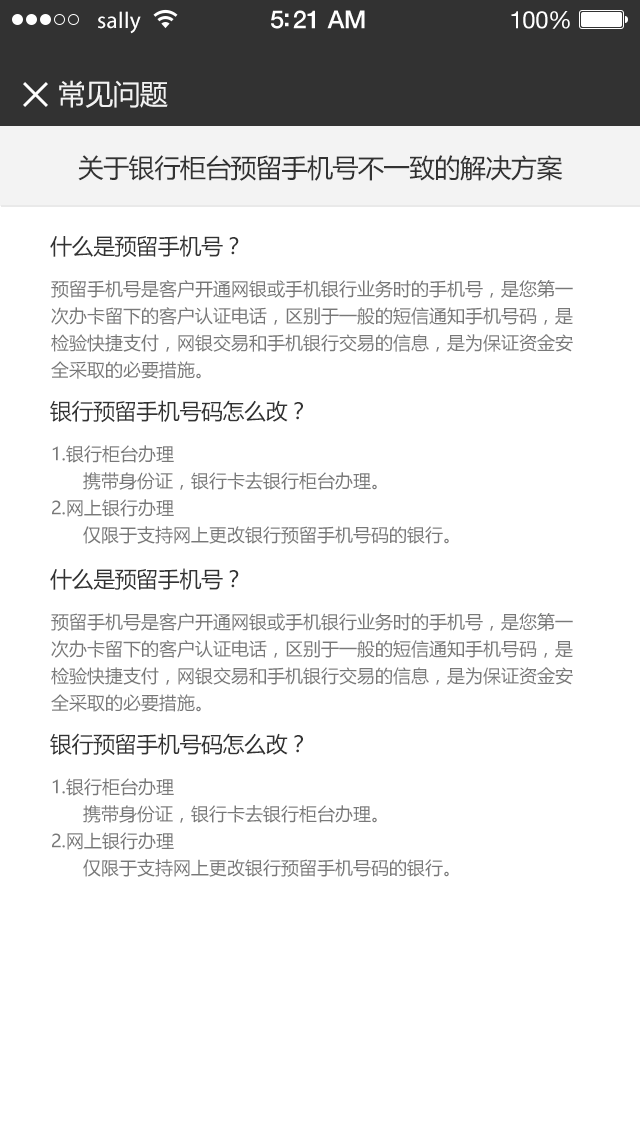
<style>
.page{position:relative;width:640px;height:1136px;background:#ffffff}
.page>*{position:absolute;margin:0}
.t1{font:23px "MyriadPro-Regular";letter-spacing:0.02em;color:#ffffff}
.t2{font:25px "HelveticaNeue-Medium";letter-spacing:-0.02em;color:#ffffff}
.t3{font:24px "HelveticaNeue";letter-spacing:-0.02em;color:#ffffff}
.t4{font:28px "MicrosoftYaHei";letter-spacing:-0.02em;color:#f3f3f3}
.t5{font:26px "MicrosoftYaHei";letter-spacing:-0.02em;color:#323232}
.t6{font:22px "MicrosoftYaHei";letter-spacing:-0.02em;color:#323232}
.t7{font:18px/27px "MicrosoftYaHei";color:#787878}
</style>
<div class="page">
<p class="t1" style="left:98px;top:11px;width:43px;height:23px">sally</p>
<p class="t2" style="left:271px;top:10px;width:94px;height:19px">5:21 AM</p>
<p class="t3" style="left:511px;top:11px;width:59px;height:18px">100%</p>
<p class="t4" style="left:59px;top:80px;width:109px;height:28px">常见问题</p>
<p class="t5" style="left:78px;top:155px;width:485px;height:26px">关于银行柜台预留手机号不一致的解决方案</p>
<p class="t6" style="left:50px;top:235px;width:189px;height:23px">什么是预留手机号？</p>
<p class="t7" style="left:51px;top:280px;width:522px;height:99px">预留手机号是客户开通网银或手机银行业务时的手机号，是您第一次办卡留下的客户认证电话，区别于一般的短信通知手机号码，是检验快捷支付，网银交易和手机银行交易的信息，是为保证资金安全采取的必要措施。</p>
<p class="t6" style="left:50px;top:400px;width:253px;height:23px">银行预留手机号码怎么改？</p>
<p class="t7" style="left:52px;top:445px;width:397px;height:99px">1.银行柜台办理<br>      携带身份证，银行卡去银行柜台办理。<br>2.网上银行办理<br>      仅限于支持网上更改银行预留手机号码的银行。</p>
<p class="t6" style="left:50px;top:568px;width:189px;height:23px">什么是预留手机号？</p>
<p class="t7" style="left:51px;top:613px;width:522px;height:99px">预留手机号是客户开通网银或手机银行业务时的手机号，是您第一次办卡留下的客户认证电话，区别于一般的短信通知手机号码，是检验快捷支付，网银交易和手机银行交易的信息，是为保证资金安全采取的必要措施。</p>
<p class="t6" style="left:50px;top:733px;width:253px;height:23px">银行预留手机号码怎么改？</p>
<p class="t7" style="left:52px;top:778px;width:397px;height:99px">1.银行柜台办理<br>      携带身份证，银行卡去银行柜台办理。<br>2.网上银行办理<br>      仅限于支持网上更改银行预留手机号码的银行。</p>
</div>
